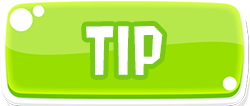
<style>
.page{position:relative;width:250px;height:106px;background:#98de01}
.page>*{position:absolute;margin:0}
.t1{font:66.7px "Splat2K";letter-spacing:0.01em;color:#ffffff}
</style>
<div class="page">
<p class="t1" style="left:86px;top:26px;width:77px;height:49px">TIP</p>
</div>
